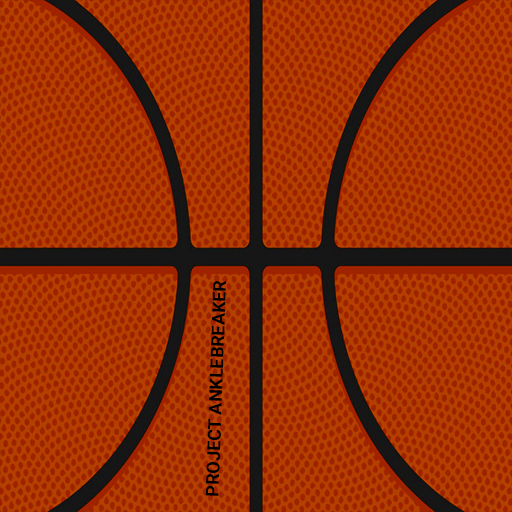
<style>
.page{position:relative;width:512px;height:512px}
.page>*{position:absolute;margin:0}
.t1{font:18px "Roboto-Bold";color:#010101}
</style>
<div class="page">
<p class="t1" style="left:205px;top:281px;width:22px;height:215px;rotate:-88deg">PROJECT ANKLEBREAKER</p>
</div>
